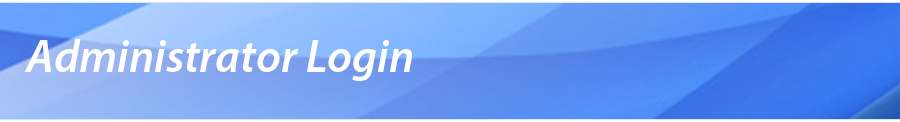
<style>
.page{position:relative;width:900px;height:122px}
.page>*{position:absolute;margin:0}
.t1{font:46.4px "MyriadPro-SemiboldIt";color:#ffffff}
</style>
<div class="page">
<p class="t1" style="left:24px;top:39px;width:388px;height:42px">Administrator Login</p>
</div>
